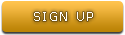
<style>
.page{position:relative;width:125px;height:35px}
.page>*{position:absolute;margin:0}
.t1{font:12px "Tahoma";letter-spacing:0.2em;color:#ffffff}
</style>
<div class="page">
<p class="t1" style="left:34px;top:12px;width:59px;height:9px">SIGN UP</p>
</div>
